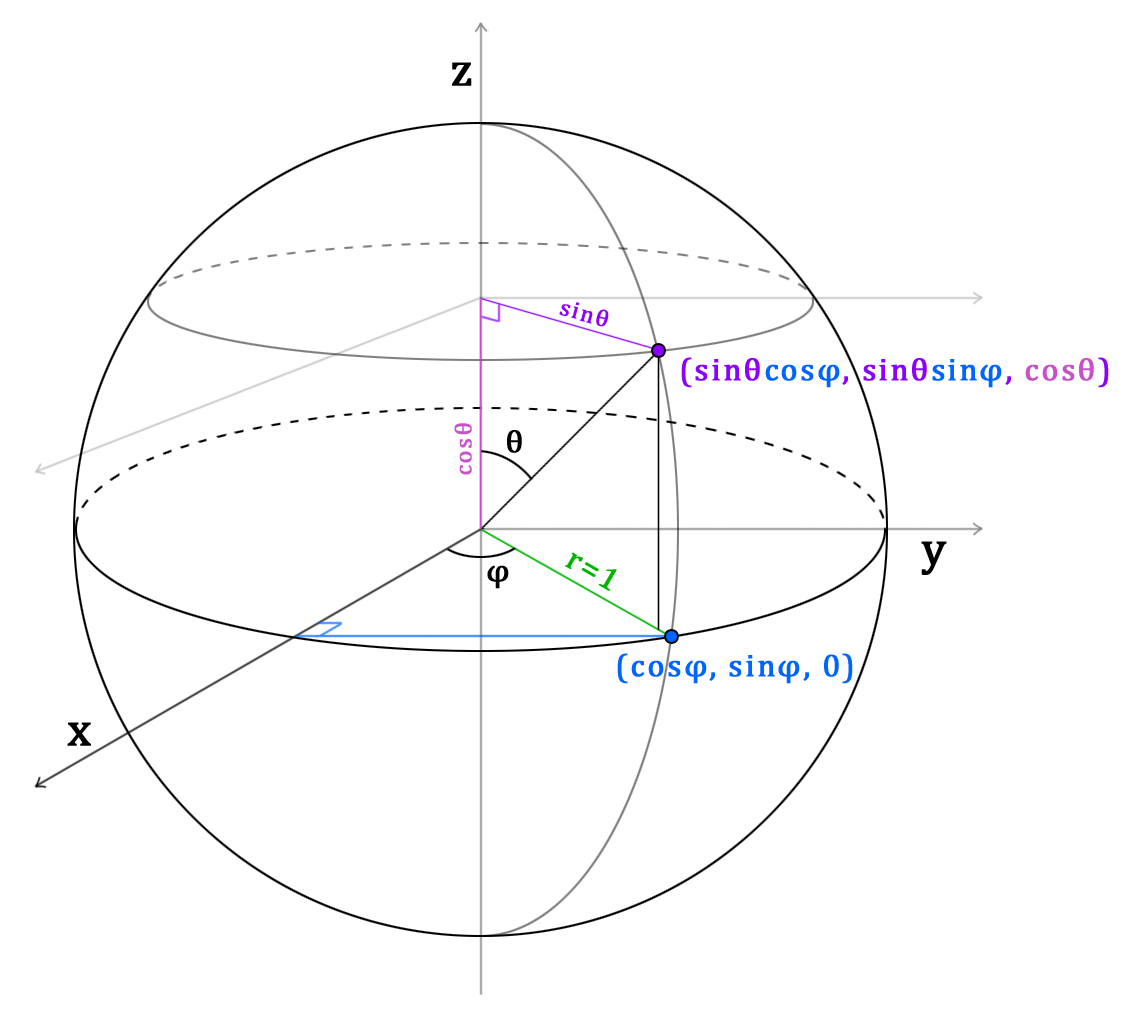
<style>
.page{position:relative;width:1138px;height:1030px;background:#ffffff}
.page>*{position:absolute;margin:0}
.t1{font:48px "Cambria";letter-spacing:0.06em;color:#000000;font-weight:bold}
.t2{font:24px "Cambria";letter-spacing:0.06em;color:#8c00ff;font-weight:bold}
.t3{font:32px "Cambria";letter-spacing:0.06em;color:#8c00ff;font-weight:bold}
.t4{font:32px "Cambria";letter-spacing:0.06em;color:#0064ff;font-weight:bold}
.t5{font:32px "Cambria";letter-spacing:0.06em;color:#c850c8;font-weight:bold}
.t6{font:24px "Cambria";letter-spacing:0.06em;color:#c850c8;font-weight:bold}
.t7{font:32px "Cambria";letter-spacing:0.06em;color:#000000;font-weight:bold}
.t8{font:32px "Cambria";letter-spacing:0.06em;color:#00b400;font-weight:bold}
</style>
<div class="page">
<p class="t1" style="left:452px;top:62px;width:20px;height:24px">z</p>
<p class="t2" style="left:559px;top:302px;width:50px;height:25px;rotate:15deg">sinθ</p>
<p class="t3" style="left:681px;top:357px;width:428px;height:31px">(sinθ<span class="t4">cosφ</span>, sinθ<span class="t4">sinφ</span>, <span class="t5">cosθ</span>)</p>
<p class="t6" style="left:454px;top:423px;width:18px;height:52px;rotate:-90deg">cosθ</p>
<p class="t7" style="left:507px;top:430px;width:15px;height:23px">θ</p>
<p class="t1" style="left:921px;top:541px;width:26px;height:34px">y</p>
<p class="t8" style="left:565px;top:552px;width:52px;height:39px;rotate:30deg">r=1</p>
<p class="t7" style="left:487px;top:565px;width:22px;height:24px">φ</p>
<p class="t4" style="left:617px;top:653px;width:236px;height:31px">(cosφ, sinφ, 0)</p>
<p class="t1" style="left:67px;top:722px;width:24px;height:24px">x</p>
</div>
